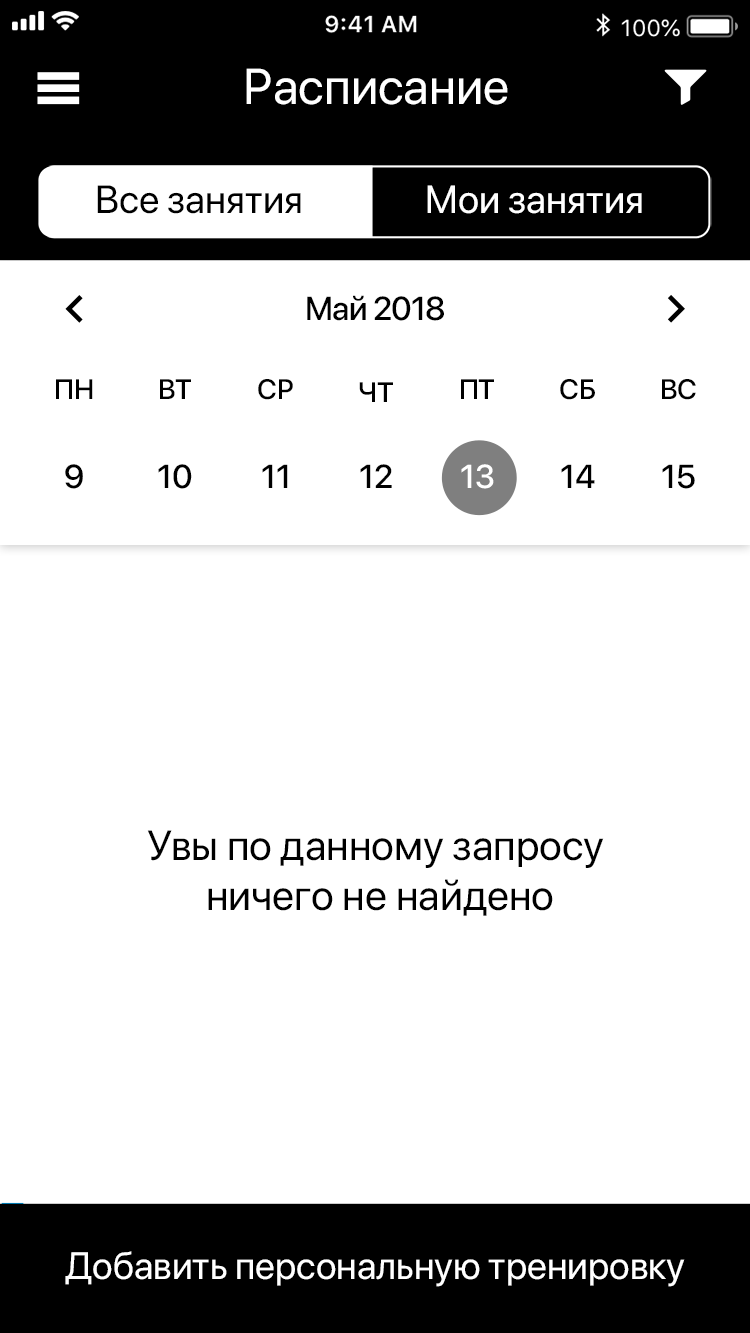
<style>
.page{position:relative;width:750px;height:1333px;background:#ffffff}
.page>*{position:absolute;margin:0}
.t1{font:50px "SFProDisplay-Regular";color:#ffffff}
.t2{font:39px "SFProDisplay-Regular";color:#000000}
.t3{font:39px "SFProDisplay-Regular";color:#ffffff}
.t4{font:33px "SFProDisplay-Medium";letter-spacing:-0.023em;color:#000000}
.t5{font:28px "SFProDisplay-Medium";color:#000000}
.t6{font:33px "SFProDisplay-Medium";color:#000000}
.t7{font:33px "SFProDisplay-Medium";color:#ffffff}
.t8{font:42px "SFProDisplay-Regular";color:#000000}
.t9{font:38px "SFProDisplay-Regular";color:#ffffff}
</style>
<div class="page">
<p class="t1" style="left:246px;top:68px;width:262px;height:37px">Расписание</p>
<p class="t2" style="left:97px;top:185px;width:204px;height:29px">Все занятия</p>
<p class="t3" style="left:427px;top:185px;width:215px;height:29px">Мои занятия</p>
<p class="t4" style="left:307px;top:295px;width:137px;height:26px">Май 2018</p>
<p class="t5" style="left:56px;top:379px;width:37px;height:20px">ПН</p>
<p class="t5" style="left:160px;top:379px;width:31px;height:20px">ВТ</p>
<p class="t5" style="left:258px;top:379px;width:35px;height:21px">СР</p>
<p class="t5" style="left:359px;top:382px;width:34px;height:20px">ЧТ</p>
<p class="t5" style="left:461px;top:379px;width:33px;height:20px">ПТ</p>
<p class="t5" style="left:560px;top:379px;width:35px;height:21px">СБ</p>
<p class="t5" style="left:662px;top:379px;width:34px;height:21px">ВС</p>
<p class="t6" style="left:65px;top:464px;width:18px;height:25px">9</p>
<p class="t6" style="left:158px;top:464px;width:34px;height:25px">10</p>
<p class="t6" style="left:262px;top:464px;width:26px;height:24px">11</p>
<p class="t6" style="left:360px;top:464px;width:32px;height:24px">12</p>
<p class="t7" style="left:461px;top:464px;width:33px;height:25px">13</p>
<p class="t6" style="left:561px;top:464px;width:34px;height:24px">14</p>
<p class="t6" style="left:662px;top:464px;width:33px;height:25px">15</p>
<p class="t8" style="left:147px;top:830px;width:457px;height:86px;text-align:center">Увы по данному запросу <br>ничего не найдено</p>
<p class="t9" style="left:65px;top:1251px;width:620px;height:36px">Добавить персональную тренировку</p>
</div>
